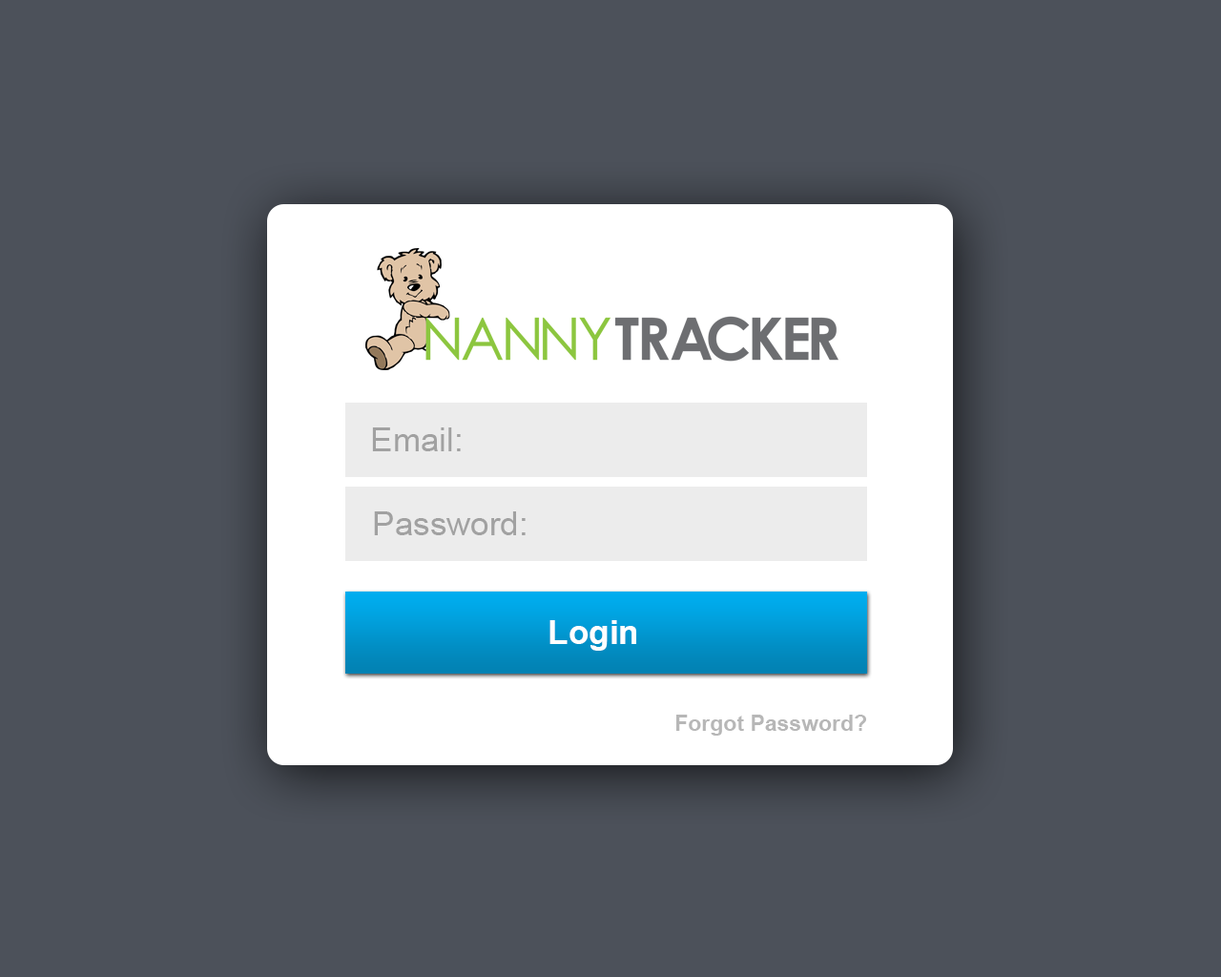
<style>
.page{position:relative;width:1221px;height:977px;background:#4c515a}
.page>*{position:absolute;margin:0}
.t1{font:33.4px "ArialMT";color:#a1a1a1}
.t2{font:33.4px "Arial-BoldMT";color:#ffffff}
.t3{font:21.9px "Arial-BoldMT";color:#b7b7b7}
</style>
<div class="page">
<p class="t1" style="left:372px;top:427px;width:89px;height:24px">Email:</p>
<p class="t1" style="left:374px;top:511px;width:152px;height:24px">Password:</p>
<p class="t2" style="left:549px;top:620px;width:87px;height:30px">Login</p>
<p class="t3" style="left:676px;top:714px;width:190px;height:21px">Forgot Password?</p>
</div>
